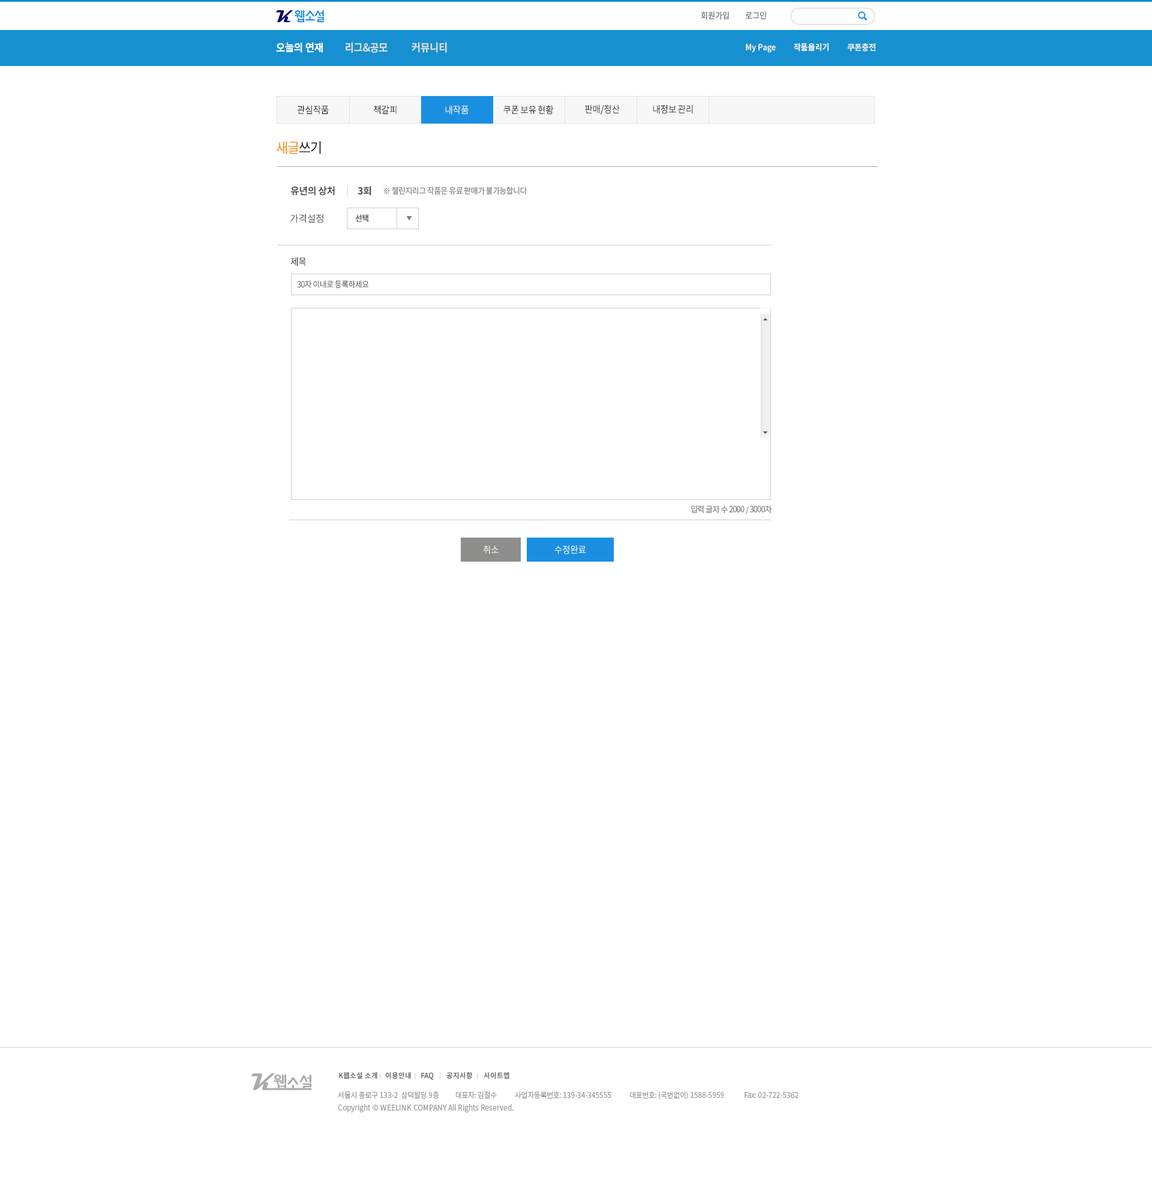
<style>
.page{position:relative;width:1152px;height:1200px;background:#ffffff}
.page>*{position:absolute;margin:0}
.t1{font:8.4px "NotoSansCJKkr-Regular";letter-spacing:-0.002em;color:#727272;scale:0.92 1}
.t2{font:10.8px "NotoSansCJKkr-Bold";letter-spacing:-0.002em;color:#dddddd;scale:0.92 1}
.t3{font:10.8px "NotoSansCJKkr-Bold";letter-spacing:-0.002em;color:#ffffff;scale:0.92 1}
.t4{font:8.4px "NotoSansCJKkr-Bold";letter-spacing:-0.002em;color:#ececec;scale:0.92 1}
.t5{font:9.6px "NotoSansCJKkr-Regular";letter-spacing:-0.05em;color:#000000;scale:0.92 1}
.t6{font:9.6px "NotoSansCJKkr-Regular";letter-spacing:-0.05em;color:#ffffff;scale:0.92 1}
.t7{font:14.4px "NotoSansCJKkr-Regular";letter-spacing:-0.05em;color:#ff8400;scale:0.92 1}
.t8{font:14.4px "NotoSansCJKkr-Regular";letter-spacing:-0.05em;color:#000000;scale:0.92 1}
.t9{font:9.6px "NotoSansCJKkr-Bold";letter-spacing:-0.025em;color:#474747}
.t10{font:8.4px "NotoSansCJKkr-Regular";letter-spacing:-0.05em;color:#888888;scale:0.92 1}
.t11{font:9.6px "NotoSansCJKkr-Regular";letter-spacing:-0.025em;color:#474747}
.t12{font:8.4px "NotoSansCJKkr-Bold";letter-spacing:-0.05em;color:#474747;scale:0.92 1}
.t13{font:8.4px "NotoSansCJKkr-Regular";letter-spacing:-0.05em;color:#474747;scale:0.92 1}
.t14{font:7.2px "NotoSansCJKkr-Bold";color:#666666;scale:0.96 1}
.t15{font:7.8px "NotoSansCJKkr-Regular";letter-spacing:-0.025em;color:#9d9d9d;scale:0.92 1}
.t16{font:7.8px "NotoSansCJKkr-Regular";color:#9d9d9d;scale:0.92 1}
</style>
<div class="page">
<p class="t1" style="left:701px;top:11px;width:28px;height:9px">회원가입</p>
<p class="t1" style="left:745px;top:11px;width:21px;height:8px">로그인</p>
<p class="t2" style="left:276px;top:42px;width:171px;height:11px"><span class="t3">오늘의 연재         </span>리그&amp;공모          커뮤니티</p>
<p class="t4" style="left:746px;top:43px;width:130px;height:10px">My Page          작품올리기          쿠폰충전</p>
<p class="t5" style="left:297px;top:105px;width:32px;height:10px">관심작품</p>
<p class="t5" style="left:374px;top:105px;width:23px;height:10px">책갈피</p>
<p class="t6" style="left:445px;top:105px;width:24px;height:10px">내작품</p>
<p class="t5" style="left:503px;top:105px;width:51px;height:10px">쿠폰 보유 현황</p>
<p class="t5" style="left:585px;top:104px;width:35px;height:11px">판매/정산</p>
<p class="t5" style="left:653px;top:105px;width:40px;height:9px">내정보 관리</p>
<p class="t7" style="left:276px;top:141px;width:45px;height:13px">새글<span class="t8">쓰기</span></p>
<p class="t9" style="left:290px;top:186px;width:45px;height:10px">유년의 상처</p>
<p class="t9" style="left:358px;top:186px;width:13px;height:10px">3회</p>
<p class="t10" style="left:383px;top:187px;width:144px;height:8px">※ 챌린지리그 작품은 유료 판매가 불가능합니다</p>
<p class="t11" style="left:290px;top:214px;width:33px;height:9px">가격설정</p>
<p class="t12" style="left:355px;top:214px;width:13px;height:8px">선택</p>
<p class="t5" style="left:290px;top:257px;width:16px;height:9px">제목</p>
<p class="t13" style="left:297px;top:280px;width:72px;height:8px">30자 이내로 등록하세요</p>
<p class="t10" style="left:691px;top:505px;width:81px;height:9px">입력 글자 수 2000 / 3000자</p>
<p class="t6" style="left:483px;top:545px;width:16px;height:9px">취소</p>
<p class="t6" style="left:554px;top:545px;width:32px;height:9px">수정완료</p>
<p class="t14" style="left:339px;top:1072px;width:38px;height:7px">K웹소설 소개</p>
<p class="t14" style="left:385px;top:1072px;width:26px;height:7px">이용안내</p>
<p class="t14" style="left:421px;top:1072px;width:13px;height:8px">FAQ</p>
<p class="t14" style="left:446px;top:1072px;width:27px;height:7px">공지사항</p>
<p class="t14" style="left:484px;top:1072px;width:25px;height:7px">사이트맵</p>
<p class="t15" style="left:338px;top:1091px;width:461px;height:9px">서울시 종로구 133-2  삼덕빌딩 9층          대표자: 김철수           사업자등록번호: 139-34-345555           대표번호: (국번없이) 1588-5959            Fax: 02-722-5362</p>
<p class="t16" style="left:338px;top:1103px;width:176px;height:9px"><span class="t15"><br><br></span>Copyright © WEELINK COMPANY All Rights Reserved.</p>
</div>
